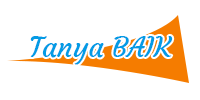
<style>
.page{position:relative;width:200px;height:100px;background:#ffffff}
.page>*{position:absolute;margin:0}
.t1{font:28px "Courgette-Regular";color:#039be5}
</style>
<div class="page">
<p class="t1" style="left:30px;top:36px;width:143px;height:29px">Tanya BAIK</p>
</div>
